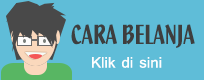
<style>
.page{position:relative;width:204px;height:80px;background:#5fbdd8}
.page>*{position:absolute;margin:0}
.t1{font:28.6px "QuixleyLetPlain";color:#3e3e3e;scale:1.04 1}
.t2{font:18.7px "Tunga";color:#fdfefe;scale:1.03 1}
</style>
<div class="page">
<p class="t1" style="left:71px;top:24px;width:124px;height:24px">CARA BELANJA</p>
<p class="t2" style="left:92px;top:57px;width:70px;height:11px">Klik di sini</p>
</div>
